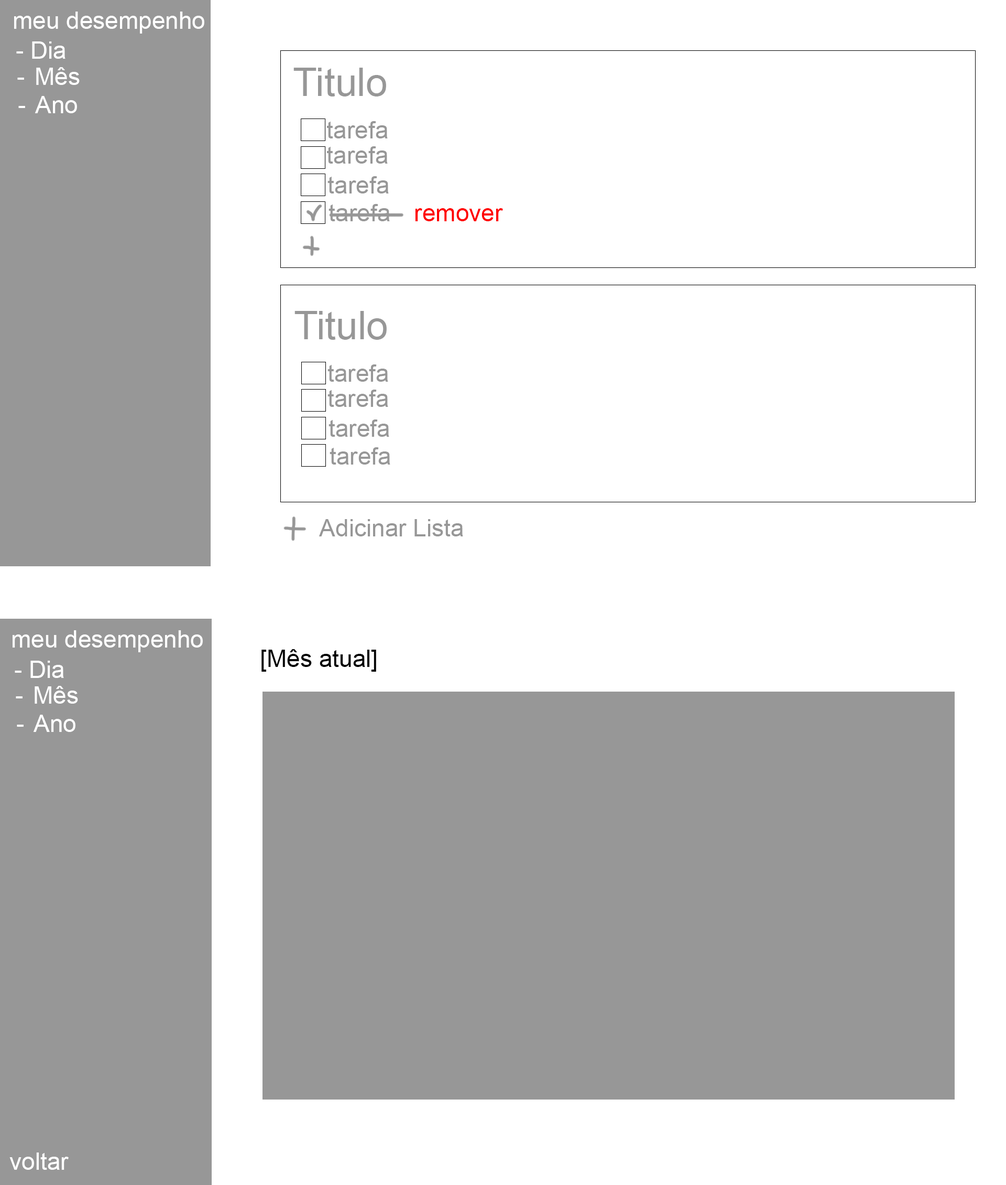
<style>
.page{position:relative;width:1006px;height:1185px;background:#ffffff}
.page>*{position:absolute;margin:0}
.t1{font:24.1px "ArialMT";color:#ffffff}
.t2{font:39.3px "ArialMT";color:#979797}
.t3{font:24.1px "ArialMT";color:#979797}
.t4{font:24.1px "ArialMT";color:#ff0000}
.t5{font:24.1px "ArialMT";color:#000000}
</style>
<div class="page">
<p class="t1" style="left:14px;top:12px;width:190px;height:22px">meu desempenho</p>
<p class="t1" style="left:16px;top:41px;width:50px;height:18px">- Dia</p>
<p class="t1" style="left:17px;top:67px;width:63px;height:18px">Mês</p>
<p class="t2" style="left:294px;top:68px;width:92px;height:28px">Titulo</p>
<p class="t1" style="left:18px;top:96px;width:59px;height:17px">Ano</p>
<p class="t3" style="left:327px;top:121px;width:61px;height:17px">tarefa</p>
<p class="t3" style="left:327px;top:146px;width:61px;height:18px">tarefa</p>
<p class="t3" style="left:328px;top:176px;width:61px;height:17px">tarefa</p>
<p class="t3" style="left:329px;top:204px;width:61px;height:17px">tarefa</p>
<p class="t4" style="left:415px;top:208px;width:88px;height:13px">remover</p>
<p class="t2" style="left:295px;top:311px;width:92px;height:29px">Titulo</p>
<p class="t3" style="left:328px;top:364px;width:60px;height:18px">tarefa</p>
<p class="t3" style="left:328px;top:389px;width:60px;height:18px">tarefa</p>
<p class="t3" style="left:329px;top:419px;width:60px;height:18px">tarefa</p>
<p class="t3" style="left:330px;top:447px;width:61px;height:17px">tarefa</p>
<p class="t3" style="left:319px;top:519px;width:144px;height:17px">Adicinar Lista</p>
<p class="t1" style="left:13px;top:630px;width:190px;height:22px">meu desempenho</p>
<p class="t5" style="left:262px;top:649px;width:114px;height:23px">[Mês atual]</p>
<p class="t1" style="left:15px;top:661px;width:49px;height:17px">- Dia</p>
<p class="t1" style="left:16px;top:686px;width:62px;height:18px">Mês</p>
<p class="t1" style="left:17px;top:715px;width:58px;height:17px">Ano</p>
<p class="t1" style="left:9px;top:1152px;width:60px;height:18px">voltar</p>
</div>
